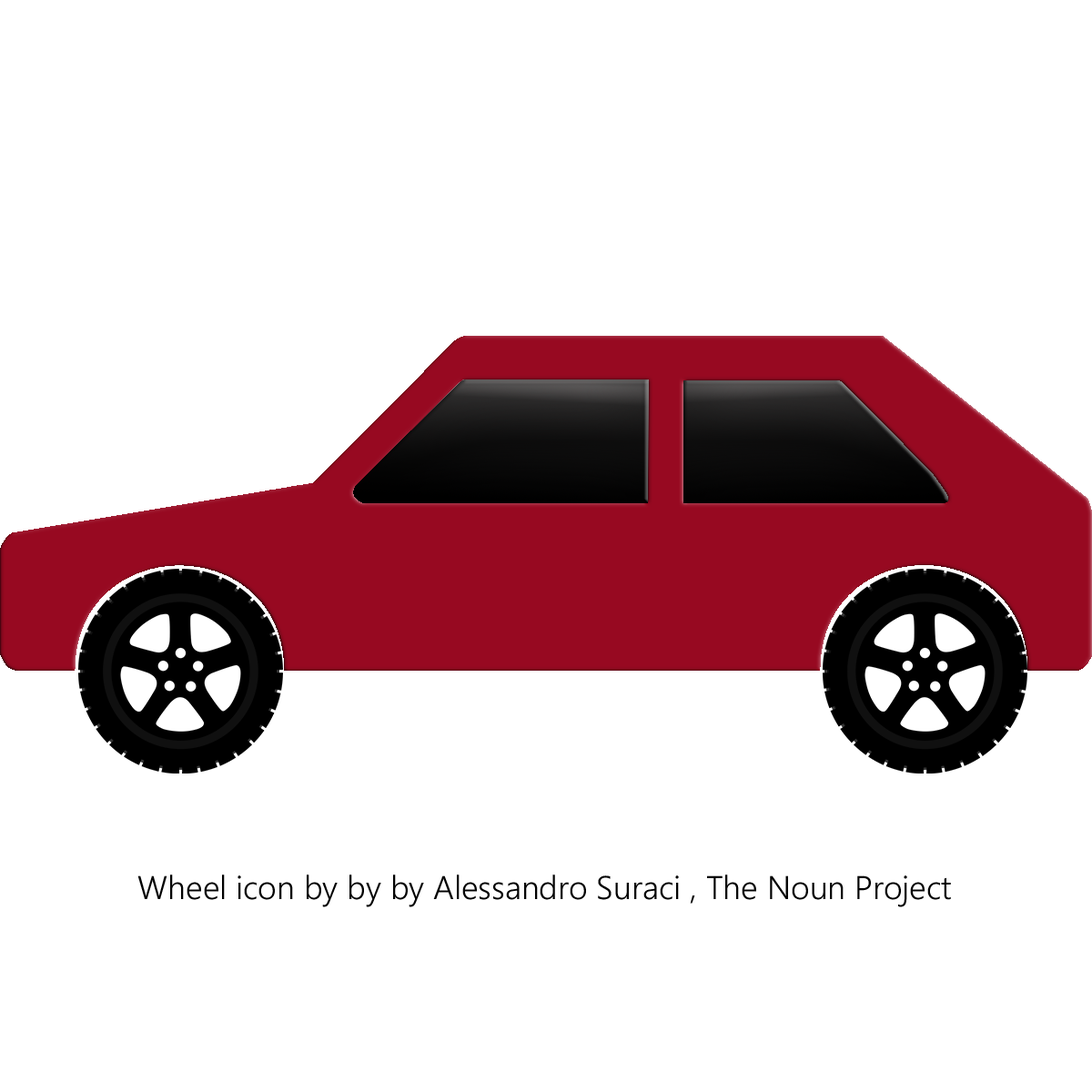
<style>
.page{position:relative;width:1092px;height:1092px;background:#ffffff}
.page>*{position:absolute;margin:0}
.t1{font:32.8px "SegoeWP-SemiLight";color:#000000}
</style>
<div class="page">
<p class="t1" style="left:137px;top:874px;width:814px;height:33px">Wheel icon by by by Alessandro Suraci , The Noun Project</p>
</div>
